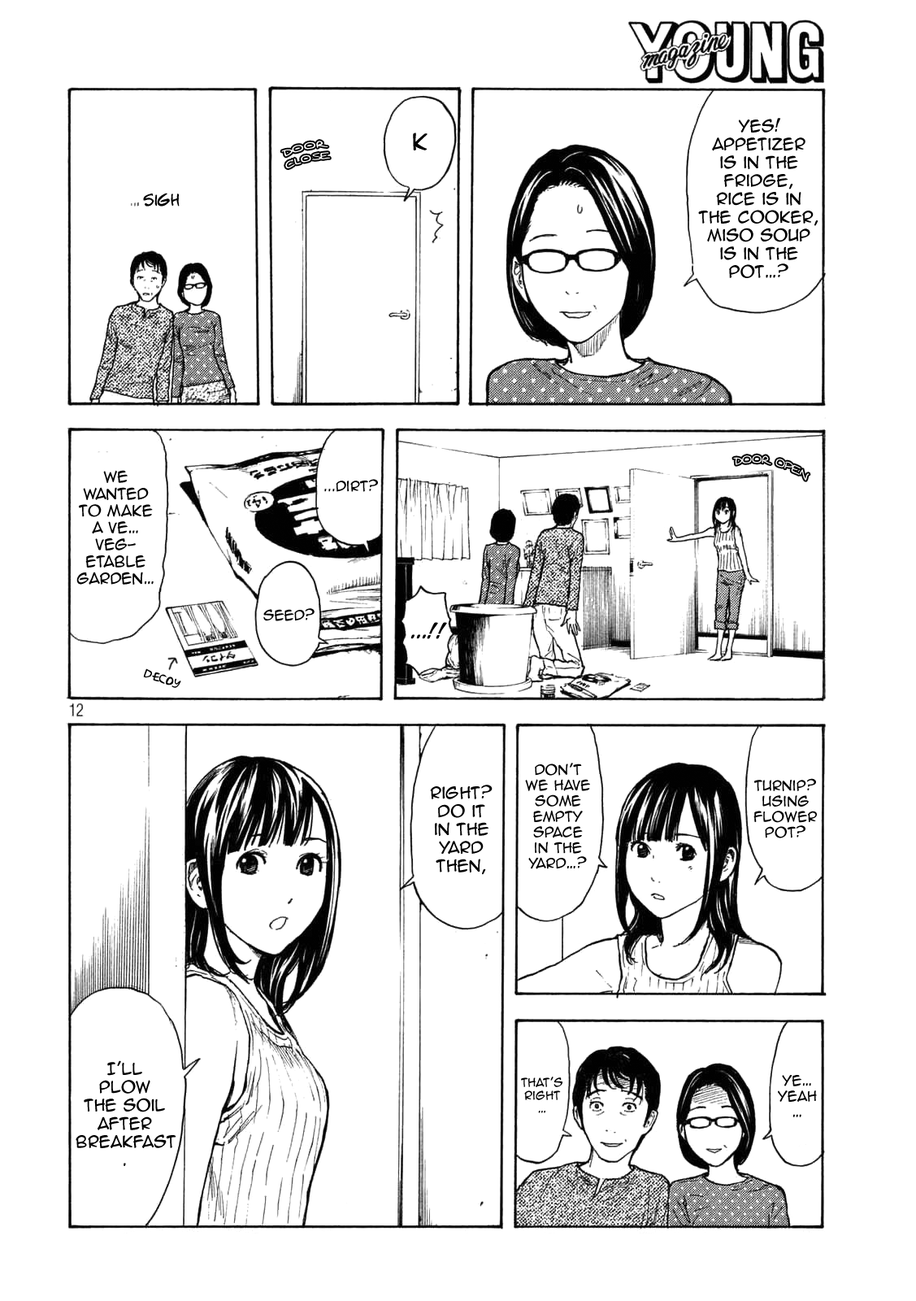
<style>
.page{position:relative;width:916px;height:1301px;background:#ffffff}
.page>*{position:absolute;margin:0}
.t1{font:15.2px "AnimeAce2.0BB";color:#000000}
.t2{font:21.7px "AnimeAce2.0BB";color:#000000}
.t3{font:16.3px "AdamWarrenpro";color:#000000}
.t4{font:14.1px "AnimeAce2.0BB";color:#000000}
.t5{font:13px "AnimeAce2.0BB";color:#000000}
.t6{font:9.8px "AnimeAce2.0BB";color:#000000}
.t7{font:16.3px "AnimeAce2.0BB-Bold";color:#000000}
.t8{font:10.8px "AkbarPlain";color:#000000}
.t9{font:10.8px "AnimeAce2.0BB";color:#000000}
</style>
<div class="page">
<p class="t1" style="left:699px;top:118px;width:120px;height:160px;text-align:center">Yes! Appetizer <br>is in the fridge, <br>rice is in the cooker, miso soup is in the pot…?</p>
<p class="t2" style="left:413px;top:133px;width:15px;height:17px">K</p>
<p class="t3" style="left:131px;top:193px;width:49px;height:14px">… Sigh</p>
<p class="t4" style="left:76px;top:470px;width:78px;height:115px;text-align:center">We wanted to make a ve… veg-<br>etable garden…</p>
<p class="t5" style="left:324px;top:479px;width:54px;height:13px">...Dirt?</p>
<p class="t6" style="left:263px;top:608px;width:52px;height:13px">Seed?</p>
<p class="t7" style="left:411px;top:622px;width:36px;height:17px">...!!</p>
<p class="t8" style="left:143px;top:668px;width:38px;height:20px;rotate:18deg">DECOY</p>
<p class="t6" style="left:525px;top:763px;width:65px;height:106px;text-align:center">Don’t we have some empty space in the yard…?</p>
<p class="t1" style="left:430px;top:785px;width:63px;height:90px;text-align:center">Right? Do it <br>in the yard <br>then,</p>
<p class="t5" style="left:754px;top:778px;width:63px;height:60px;text-align:center">Turnip? Using flowerpot?</p>
<p class="t1" style="left:76px;top:1060px;width:100px;height:106px;text-align:center">I’ll <br>plow <br>the soil after breakfast.</p>
<p class="t9" style="left:521px;top:1077px;width:42px;height:36px;text-align:center">That’s right<br>…</p>
<p class="t6" style="left:778px;top:1075px;width:39px;height:42px;text-align:center">Ye… Yeah…</p>
</div>
